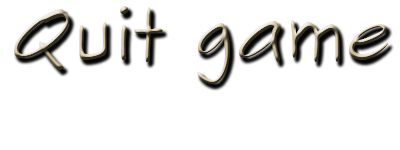
<style>
.page{position:relative;width:400px;height:150px;background:#ffffff}
.page>*{position:absolute;margin:0}
.t1{font:75px "SketchFlowPrint"}
</style>
<div class="page">
<p class="t1" style="left:14px;top:6px;width:375px;height:78px">Quit game</p>
</div>
